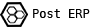
<style>
.page{position:relative;width:90px;height:27px;background:#ffffff}
.page>*{position:absolute;margin:0}
.t1{font:12px "Menlo-Regular";color:#000000}
</style>
<div class="page">
<p class="t1" style="left:33px;top:9px;width:57px;height:9px">Post ERP</p>
</div>
